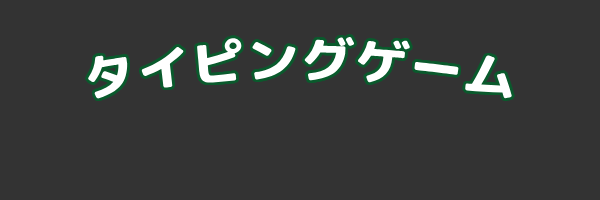
<style>
.page{position:relative;width:600px;height:200px;background:#333333}
.page>*{position:absolute;margin:0}
.t1{font:50px "rounded-l-mplus-2p-heavy";color:#ffffff}
</style>
<div class="page">
<p class="t1" style="left:88px;top:37px;width:424px;height:62px">タイピングゲーム</p>
</div>
